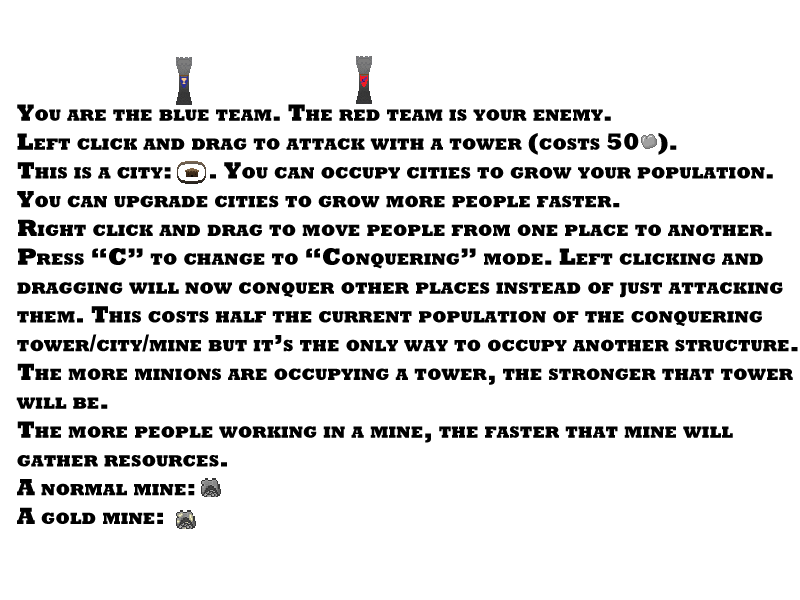
<style>
.page{position:relative;width:800px;height:600px;background:#ffffff}
.page>*{position:absolute;margin:0}
.t1{font:24px "Rockwell-ExtraBold";color:#000000;font-variant:small-caps}
</style>
<div class="page">
<p class="t1" style="left:16px;top:104px;width:782px;height:420px">You are the blue team. The red team is your enemy.<br>Left click and drag to attack with a tower (costs 50   ).<br>This is a city:      . You can occupy cities to grow your population.<br>You can upgrade cities to grow more people faster.<br>Right click and drag to move people from one place to another.<br>Press “C” to change to “Conquering” mode. Left clicking and<br>dragging will now conquer other places instead of just attacking<br>them. This costs half the current population of the conquering<br>tower/city/mine but it’s the only way to occupy another structure.<br>The more minions are occupying a tower, the stronger that tower<br>will be.<br>The more people working in a mine, the faster that mine will<br>gather resources.<br>A normal mine:<br>A gold mine:</p>
</div>
